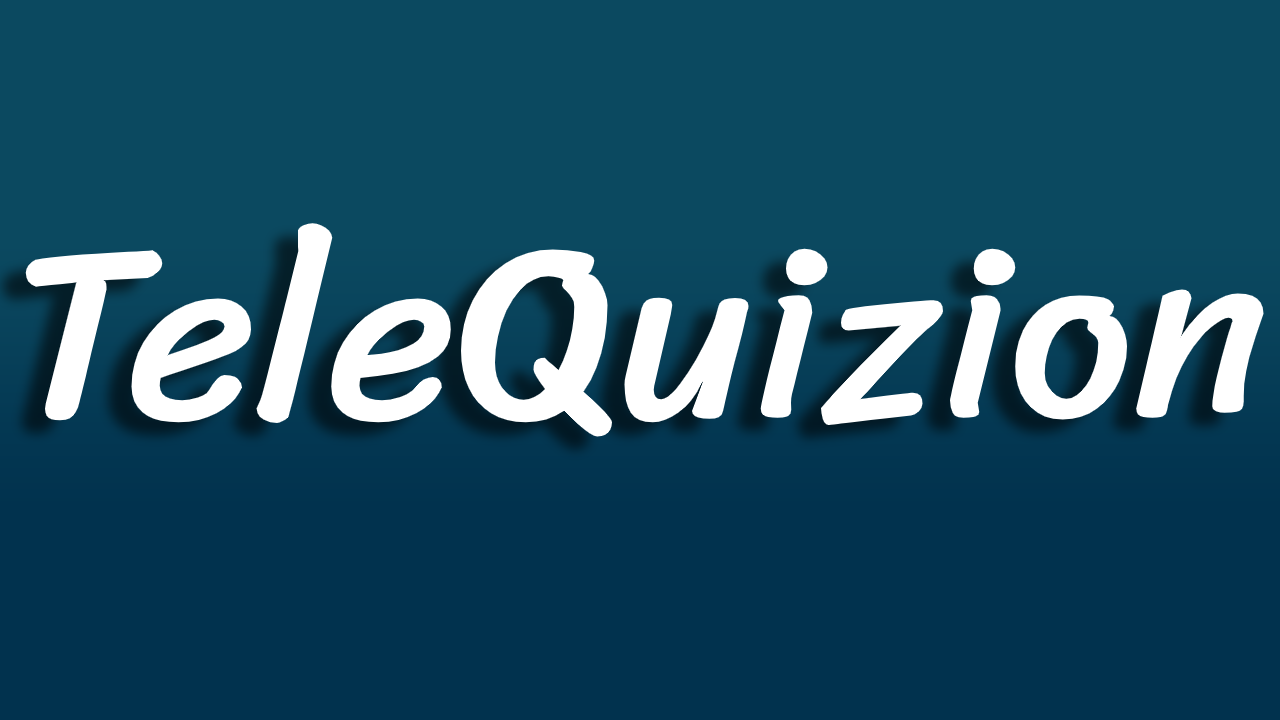
<style>
.page{position:relative;width:1280px;height:720px;background:#0b4960}
.page>*{position:absolute;margin:0}
.t1{font:250px "Sriracha-Regular";color:#ffffff}
</style>
<div class="page">
<p class="t1" style="left:25px;top:223px;width:1239px;height:214px">TeleQuizion</p>
</div>
